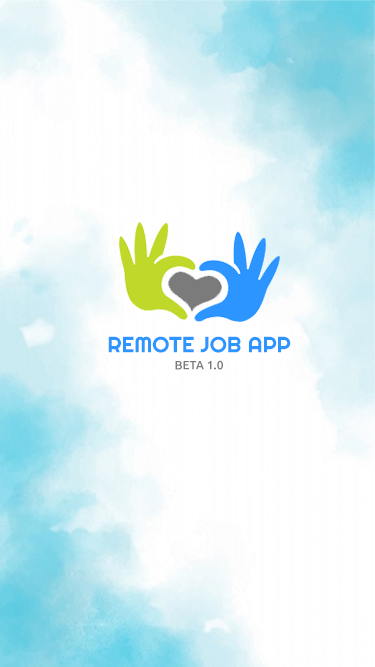
<style>
.page{position:relative;width:375px;height:667px}
.page>*{position:absolute;margin:0}
.t1{font:22px "Righteous-Regular";color:#2c95ff}
.t2{font:12px "Ubuntu-Medium";color:#7b7b7b}
</style>
<div class="page">
<p class="t1" style="left:108px;top:336px;width:183px;height:17px">REMOTE JOB APP</p>
<p class="t2" style="left:175px;top:360px;width:48px;height:10px">BETA 1.0</p>
</div>
